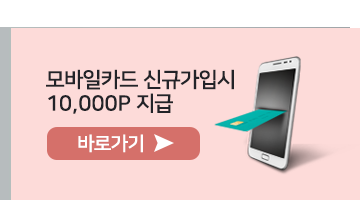
<style>
.page{position:relative;width:360px;height:200px;background:#fddbd9}
.page>*{position:absolute;margin:0}
.t1{font:21px/23.8px "NanumSquare_acB";color:#222328}
.t2{font:19.1px "NanumSquare_acB";color:#ffffff}
</style>
<div class="page">
<p class="t1" style="left:46px;top:69px;width:188px;height:45px">모바일카드 신규가입시<br>10,000P 지급</p>
<p class="t2" style="left:78px;top:134px;width:65px;height:19px">바로가기</p>
</div>
